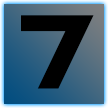
<style>
.page{position:relative;width:108px;height:108px}
.page>*{position:absolute;margin:0}
.t1{font:150px "ROBOTECHGP";color:#000000}
</style>
<div class="page">
<p class="t1" style="left:21px;top:15px;width:73px;height:74px">7</p>
</div>
